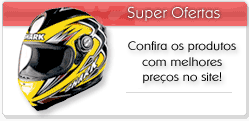
<style>
.page{position:relative;width:249px;height:121px;background:#ffffff}
.page>*{position:absolute;margin:0}
.t1{font:12.7px "SharnayExtralight";color:#000000}
</style>
<div class="page">
<p class="t1" style="left:128px;top:41px;width:108px;height:43px;text-align:center">Confira os produtos<br>com melhores<br>preços no site!</p>
</div>
